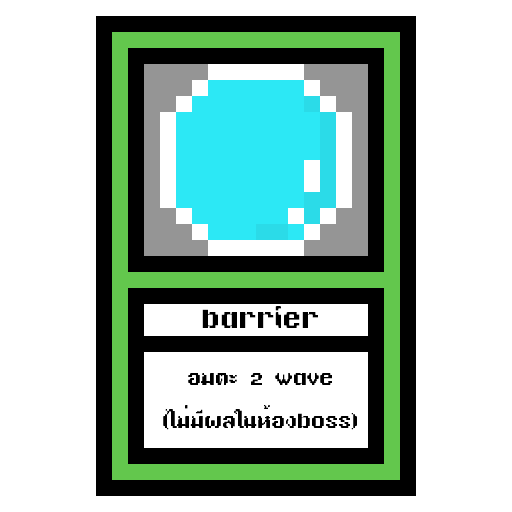
<style>
.page{position:relative;width:512px;height:512px;background:#ffffff}
.page>*{position:absolute;margin:0}
.t1{font:24px "TA16BIT-Regular";color:#000000}
.t2{font:18px "TA16BIT-Regular";color:#000000}
</style>
<div class="page">
<p class="t1" style="left:202px;top:306px;width:116px;height:22px">barrier</p>
<p class="t2" style="left:163px;top:373px;width:194px;height:57px;text-align:center">อมตะ 2 wave<br><br>(ไม่มีผลในห้องboss)</p>
</div>
